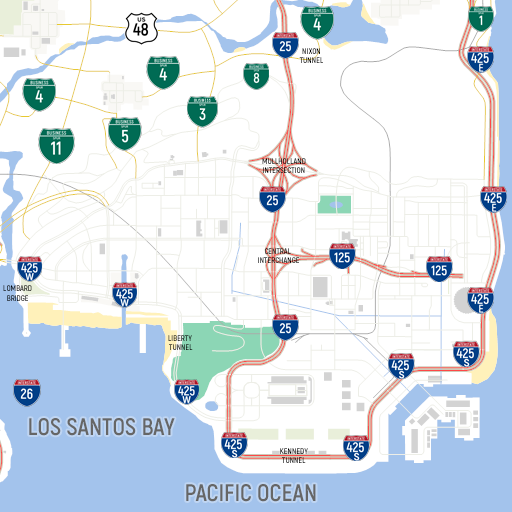
<style>
.page{position:relative;width:512px;height:512px;background:#ffffff}
.page>*{position:absolute;margin:0}
.t1{font:8px "Akrobat-Bold";color:#000000}
.t2{font:8px "Akrobat-Bold"}
.t3{font:24px "Akrobat-Bold";color:#666666}
</style>
<div class="page">
<p class="t1" style="left:299px;top:48px;width:24px;height:15px;text-align:center">NIXON<br>TUNNEL</p>
<p class="t1" style="left:262px;top:158px;width:44px;height:15px;text-align:center">MULLHOLLAND<br>INTERSECTION</p>
<p class="t1" style="left:258px;top:248px;width:41px;height:15px;text-align:center">CENTRAL <br>INTERCHANGE</p>
<p class="t1" style="left:3px;top:285px;width:29px;height:16px;text-align:center">LOMBARD<br>BRIDGE</p>
<p class="t2" style="left:168px;top:335px;width:25px;height:15px;text-align:center">LIBERTY<br> TUNNEL</p>
<p class="t3" style="left:29px;top:418px;width:146px;height:18px">LOS SANTOS BAY</p>
<p class="t1" style="left:280px;top:448px;width:28px;height:15px;text-align:center">KENNEDY<br>TUNNEL</p>
<p class="t3" style="left:186px;top:484px;width:130px;height:18px">PACIFIC OCEAN</p>
</div>
